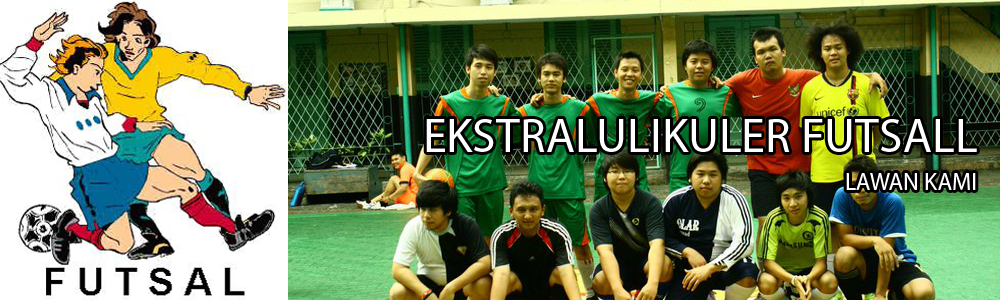
<style>
.page{position:relative;width:1000px;height:300px}
.page>*{position:absolute;margin:0}
.t1{font:48px "MyriadPro-Regular";color:#ffffff}
.t2{font:24px "MyriadPro-Regular";color:#ffffff}
</style>
<div class="page">
<p class="t1" style="left:426px;top:119px;width:551px;height:33px">EKSTRALULIKULER FUTSALL</p>
<p class="t2" style="left:846px;top:173px;width:130px;height:17px">LAWAN KAMI</p>
</div>
